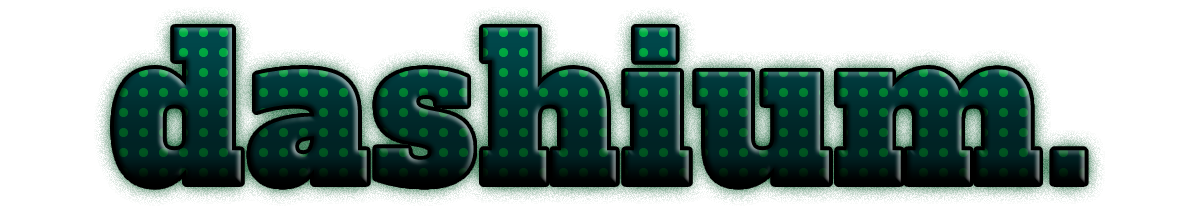
<style>
.page{position:relative;width:1200px;height:215px;background:#ffffff}
.page>*{position:absolute;margin:0}
.t1{font:200px "AlfaSlabOne-Regular";letter-spacing:0.015em}
</style>
<div class="page">
<p class="t1" style="left:114px;top:27px;width:971px;height:159px">dashium.</p>
</div>
